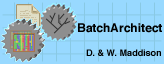
<style>
.page{position:relative;width:164px;height:64px;background:#98d9ff}
.page>*{position:absolute;margin:0}
.t1{font:12px "Helvetica-Bold";color:#000000}
.t2{font:9px "Helvetica-Bold";color:#000000}
</style>
<div class="page">
<p class="t1" style="left:78px;top:23px;width:84px;height:10px">BatchArchitect</p>
<p class="t2" style="left:86px;top:49px;width:75px;height:7px">D. &amp; W. Maddison</p>
</div>
